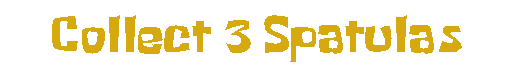
<style>
.page{position:relative;width:512px;height:76px;background:#ffffff}
.page>*{position:absolute;margin:0}
.t1{font:36.7px "SpongeboyRegular";color:#d6aa0f}
</style>
<div class="page">
<p class="t1" style="left:52px;top:15px;width:410px;height:47px">Collect 3 Spatulas</p>
</div>
